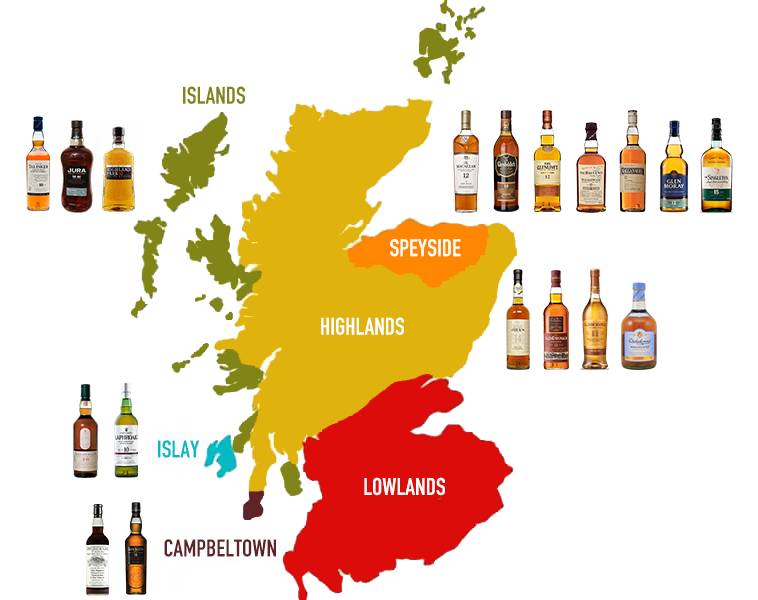
<style>
.page{position:relative;width:758px;height:600px;background:#ffffff}
.page>*{position:absolute;margin:0}
.t1{font:24px "DINCondensed-Bold";color:#818517}
.t2{font:24px "DINCondensed-Bold";color:#ffffff}
.t3{font:24px "DINCondensed-Bold";color:#05bac1}
.t4{font:24px "DINCondensed-Bold";color:#5f2428}
</style>
<div class="page">
<p class="t1" style="left:183px;top:86px;width:62px;height:18px">ISLANDS</p>
<p class="t2" style="left:390px;top:239px;width:71px;height:18px">SPEYSIDE</p>
<p class="t2" style="left:321px;top:317px;width:83px;height:18px">HIGHLANDS</p>
<p class="t3" style="left:158px;top:440px;width:42px;height:18px">ISLAY</p>
<p class="t2" style="left:364px;top:477px;width:81px;height:19px">LOWLANDS</p>
<p class="t4" style="left:164px;top:539px;width:112px;height:18px">CAMPBELTOWN</p>
</div>
